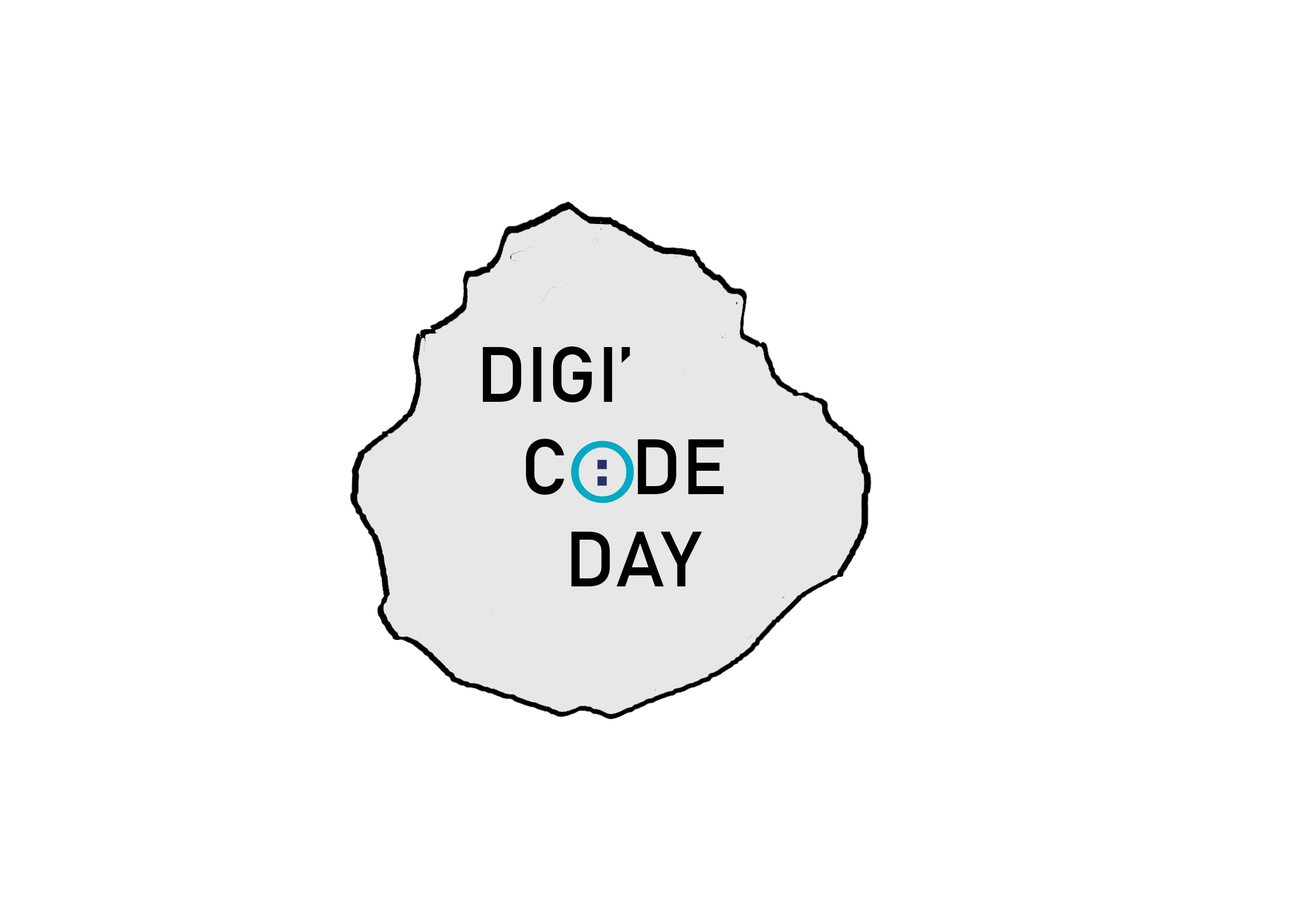
<style>
.page{position:relative;width:1292px;height:923px;background:#ffffff}
.page>*{position:absolute;margin:0}
.t1{font:76.9px "Bahnschrift_485wght";color:#000000}
</style>
<div class="page">
<p class="t1" style="left:482px;top:346px;width:242px;height:240px">DIGI’<br>  C   DE<br>    DAY</p>
</div>
